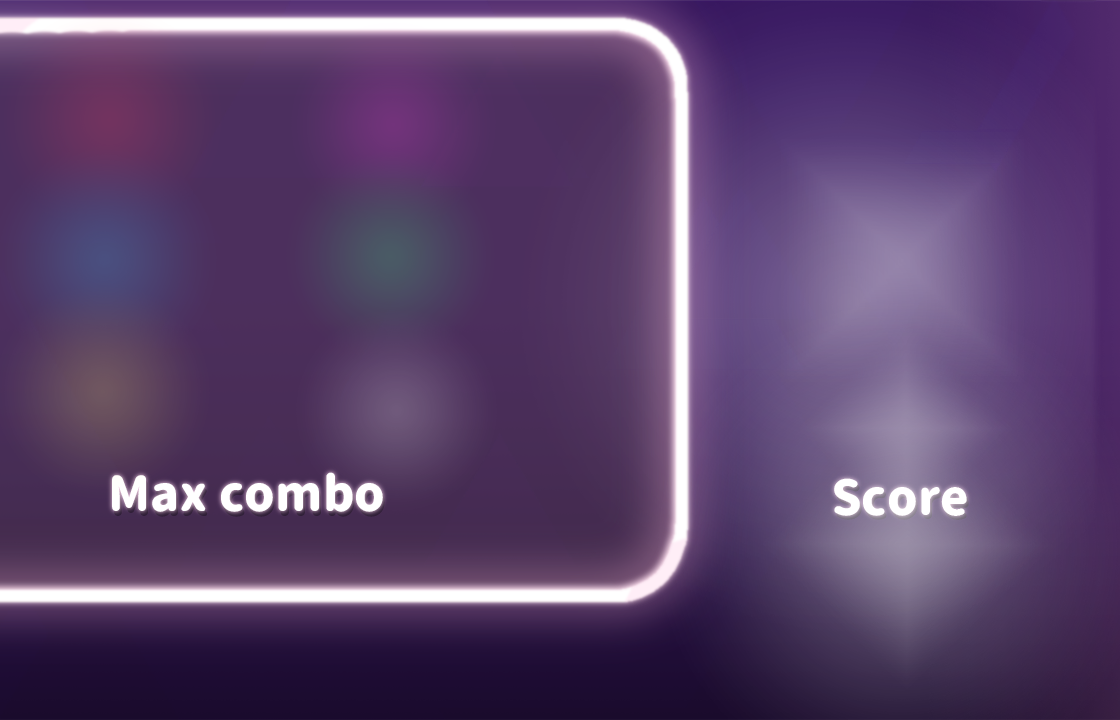
<style>
.page{position:relative;width:1120px;height:720px}
.page>*{position:absolute;margin:0}
.t1{font:48px "Corporate-Logo-Rounded";color:#ffffff}
.t2{font:48px "Corporate-Logo-Rounded"}
</style>
<div class="page">
<p class="t1" style="left:112px;top:472px;width:271px;height:40px">Max combo</p>
<p class="t2" style="left:114px;top:477px;width:271px;height:40px">Max combo</p>
<p class="t1" style="left:834px;top:478px;width:133px;height:38px">Score</p>
</div>
